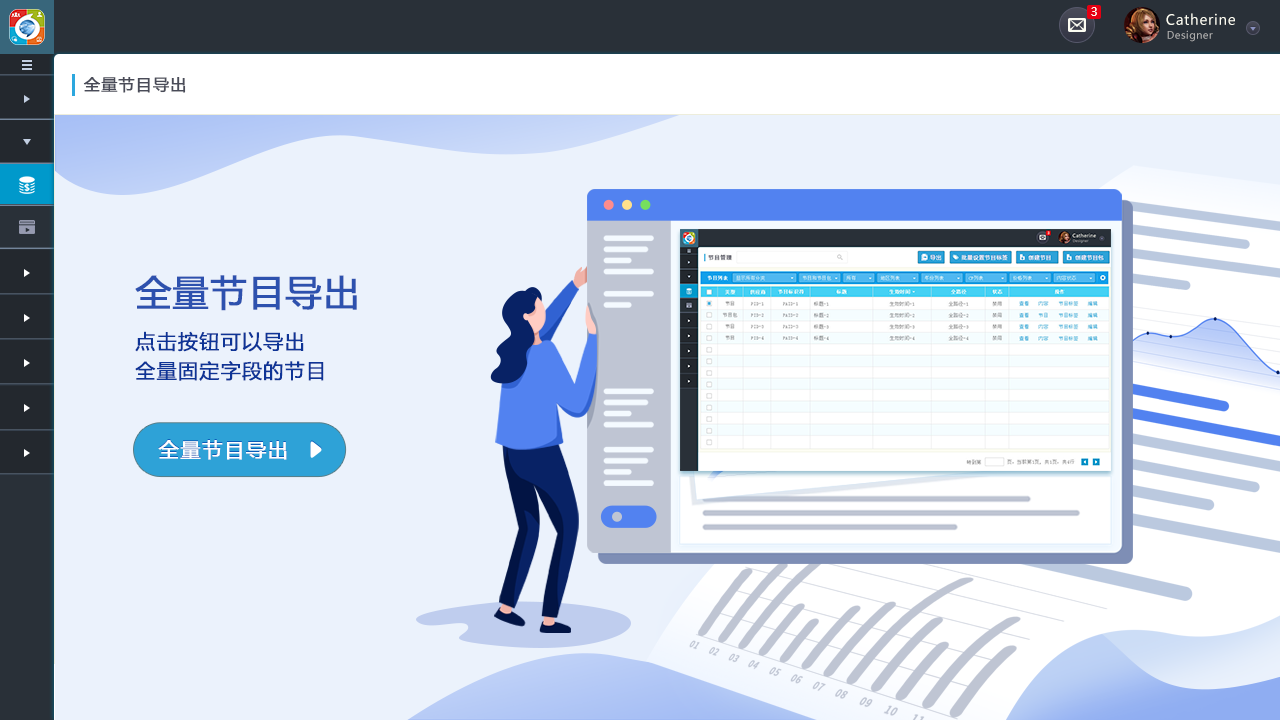
<style>
.page{position:relative;width:1280px;height:720px;background:#ebf2fc}
.page>*{position:absolute;margin:0}
.t1{font:12px "MicrosoftYaHei";letter-spacing:0.05em;color:#fcfcf2}
.t2{font:14px "MicrosoftYaHei";letter-spacing:0.05em;color:#fcfcf2}
.t3{font:10px "MicrosoftYaHei";letter-spacing:0.05em;color:#adadad}
.t4{font:16px "MicrosoftYaHei";letter-spacing:0.05em;color:#494b58;font-weight:bold}
.t5{font:36px "MicrosoftYaHei";letter-spacing:0.02em;color:#2d51ae;font-weight:bold}
.t6{font:20px/29.1px "MicrosoftYaHei";letter-spacing:0.04em;color:#0e3496;font-weight:bold}
.t7{font:20px "MicrosoftYaHei";letter-spacing:0.04em;color:#ffffff;font-weight:bold}
</style>
<div class="page">
<p class="t1" style="left:1091px;top:7px;width:6px;height:9px">3</p>
<p class="t2" style="left:1166px;top:13px;width:69px;height:12px">Catherine</p>
<p class="t3" style="left:1167px;top:30px;width:46px;height:12px">Designer</p>
<p class="t4" style="left:83px;top:77px;width:103px;height:16px">全量节目导出</p>
<p class="t5" style="left:135px;top:275px;width:222px;height:36px">全量节目导出</p>
<p class="t6" style="left:135px;top:331px;width:189px;height:50px">点击按钮可以导出<br>全量固定字段的节目</p>
<p class="t7" style="left:158px;top:440px;width:129px;height:20px">全量节目导出</p>
</div>
